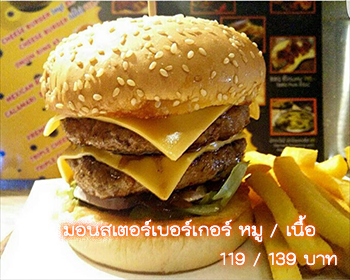
<style>
.page{position:relative;width:350px;height:280px}
.page>*{position:absolute;margin:0}
.t1{font:24px "THKodchasal";color:#ffffff}
</style>
<div class="page">
<p class="t1" style="left:63px;top:215px;width:274px;height:52px;text-align:right">มอนสเตอร์เบอร์เกอร์ หมู / เนื้อ<br>บาท 139 / 119</p>
</div>
